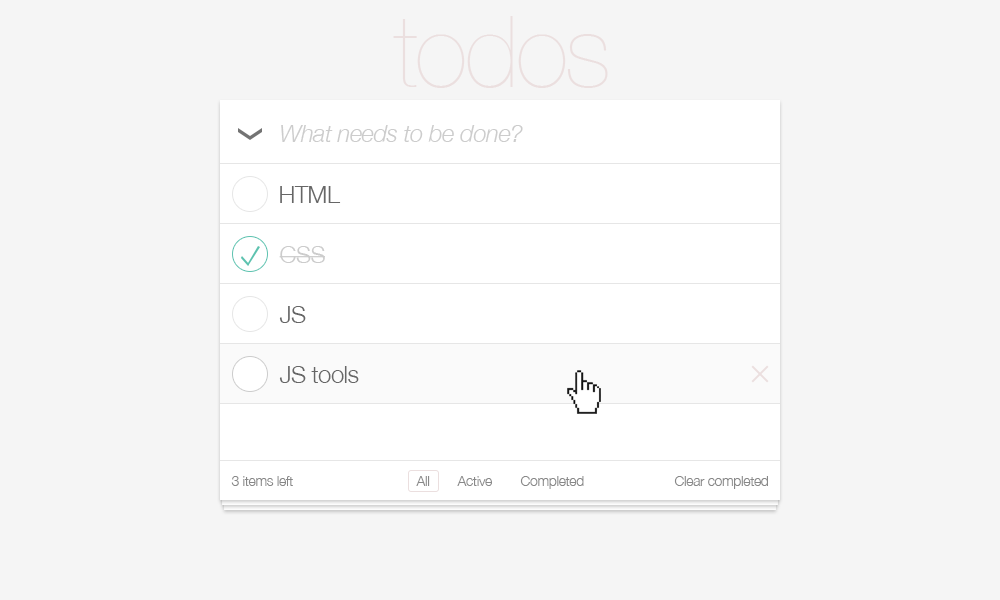
<style>
.page{position:relative;width:1000px;height:600px;background:#f5f5f5}
.page>*{position:absolute;margin:0}
.t1{font:100px "HelveticaNeue-UltraLight";letter-spacing:-0.025em;color:#ebdfdf}
.t2{font:24px "HelveticaNeue-LightItalic";letter-spacing:-0.025em;color:#cccccc}
.t3{font:24px "HelveticaNeue-Light";letter-spacing:-0.025em;color:#666666}
.t4{font:24px "HelveticaNeue-Light";letter-spacing:-0.025em;color:#cccccc}
.t5{font:14px "HelveticaNeue-Light";letter-spacing:-0.025em;color:#888888}
</style>
<div class="page">
<p class="t1" style="left:393px;top:16px;width:215px;height:72px">todos</p>
<p class="t2" style="left:281px;top:125px;width:242px;height:17px">What needs to be done?</p>
<p class="t3" style="left:280px;top:186px;width:61px;height:17px">HTML</p>
<p class="t4" style="left:279px;top:246px;width:46px;height:17px">CSS</p>
<p class="t3" style="left:279px;top:306px;width:27px;height:17px">JS</p>
<p class="t3" style="left:279px;top:366px;width:80px;height:17px">JS tools</p>
<p class="t5" style="left:231px;top:476px;width:62px;height:10px">3 items left</p>
<p class="t5" style="left:416px;top:476px;width:14px;height:10px">All</p>
<p class="t5" style="left:457px;top:476px;width:35px;height:10px">Active</p>
<p class="t5" style="left:520px;top:476px;width:64px;height:13px">Completed</p>
<p class="t5" style="left:674px;top:476px;width:94px;height:13px">Clear completed</p>
</div>
